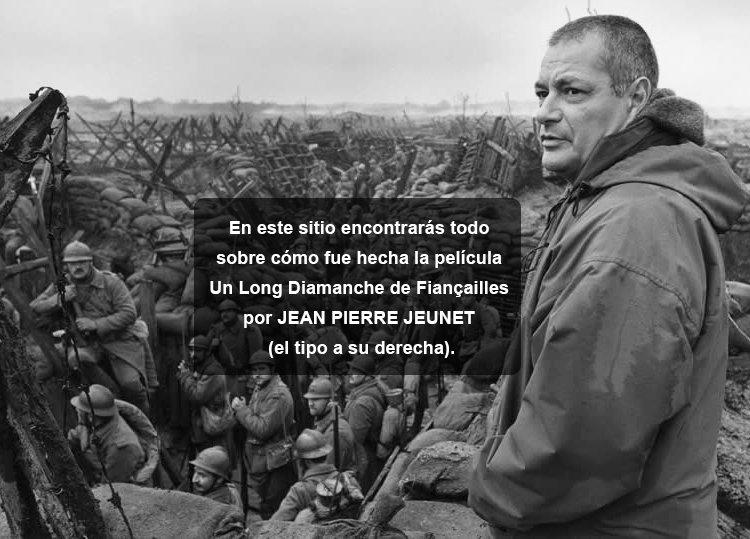
<style>
.page{position:relative;width:750px;height:539px}
.page>*{position:absolute;margin:0}
.t1{font:18px/30px "Arial-BoldMT";letter-spacing:0.005em;color:#ffffff}
</style>
<div class="page">
<p class="t1" style="left:210px;top:220px;width:299px;height:138px;text-align:center">En este sitio encontrarás todo <br>sobre cómo fue hecha la película <br>Un Long Diamanche de Fiançailles <br>por JEAN PIERRE JEUNET <br>(el tipo a su derecha).</p>
</div>
